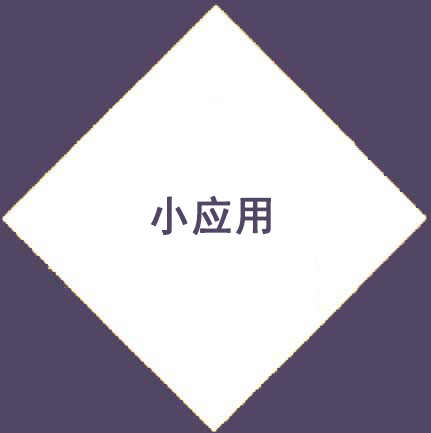
<style>
.page{position:relative;width:431px;height:433px;background:#514664}
.page>*{position:absolute;margin:0}
.t1{font:41.4px "SimHei";color:#514664;font-weight:bold}
</style>
<div class="page">
<p class="t1" style="left:151px;top:195px;width:120px;height:41px">小应用</p>
</div>
